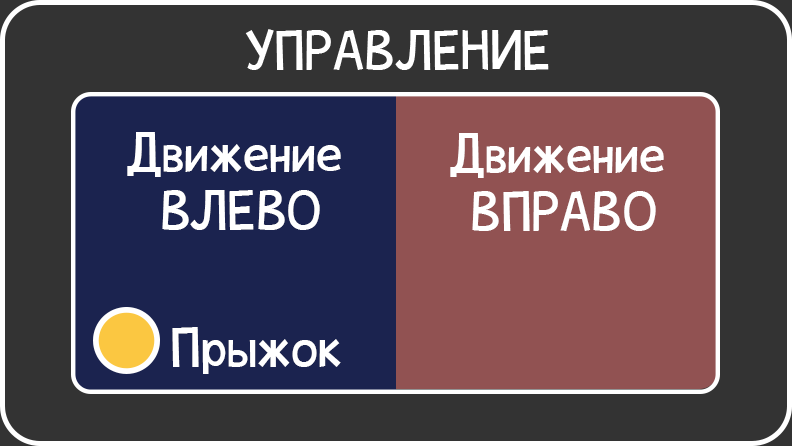
<style>
.page{position:relative;width:792px;height:446px;background:#333333}
.page>*{position:absolute;margin:0}
.t1{font:48px "CrazyV1";color:#ffffff}
</style>
<div class="page">
<p class="t1" style="left:245px;top:29px;width:304px;height:41px">УПРАВЛЕНИЕ</p>
<p class="t1" style="left:127px;top:132px;width:214px;height:98px;text-align:center">Движение <br>ВЛЕВО</p>
<p class="t1" style="left:450px;top:133px;width:214px;height:98px;text-align:center">Движение <br>ВПРАВО</p>
<p class="t1" style="left:172px;top:327px;width:169px;height:47px">Прыжок</p>
</div>
